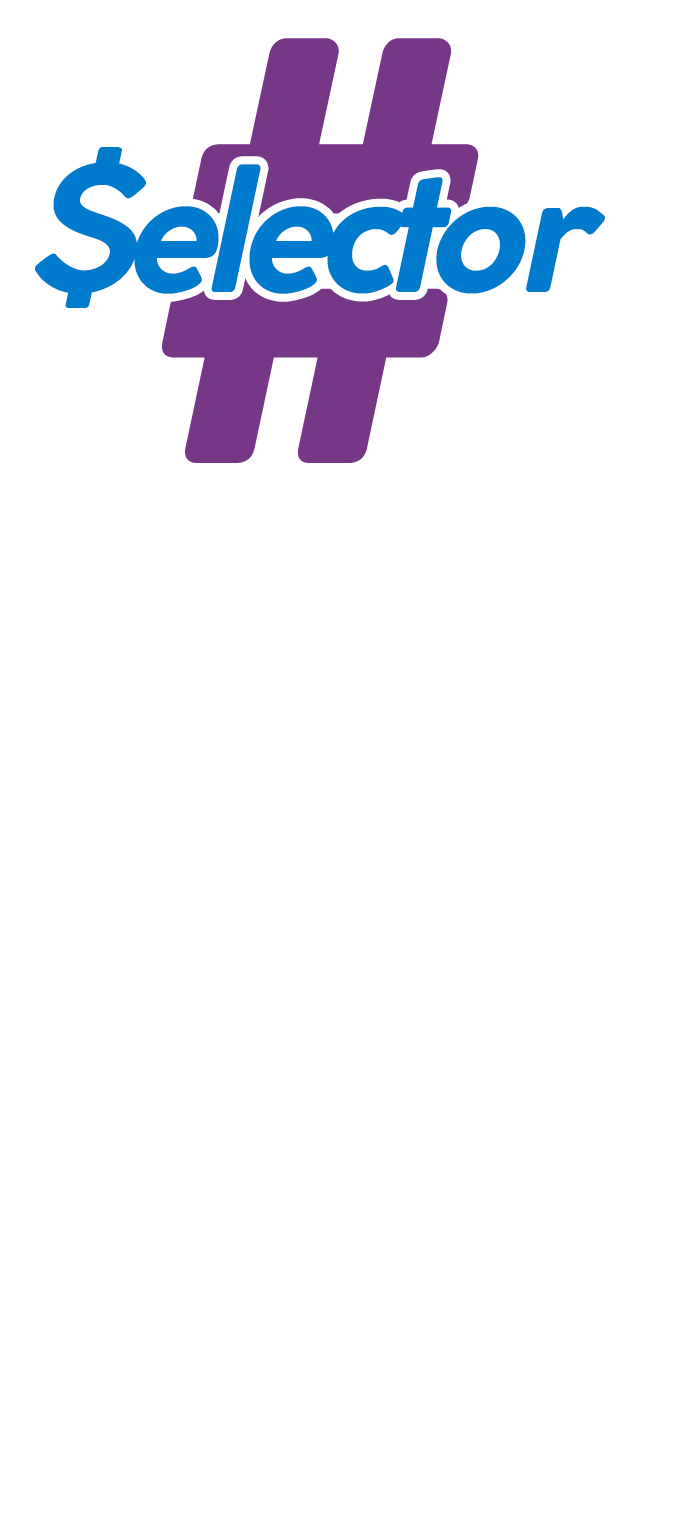
<style>
.page{position:relative;width:684px;height:1536px;background:#ffffff}
.page>*{position:absolute;margin:0}
.t1{font:572px "CocoGothic-BoldItalic";letter-spacing:-0.075em;color:#68217a}
.t2{font:172px "CocoGothic-BoldItalic";letter-spacing:-0.075em;color:#007acc}
</style>
<div class="page">
<p class="t1" style="left:162px;top:38px;width:317px;height:425px;opacity:0.9">#</p>
<p class="t2" style="left:35px;top:147px;width:570px;height:161px">$elector</p>
</div>
